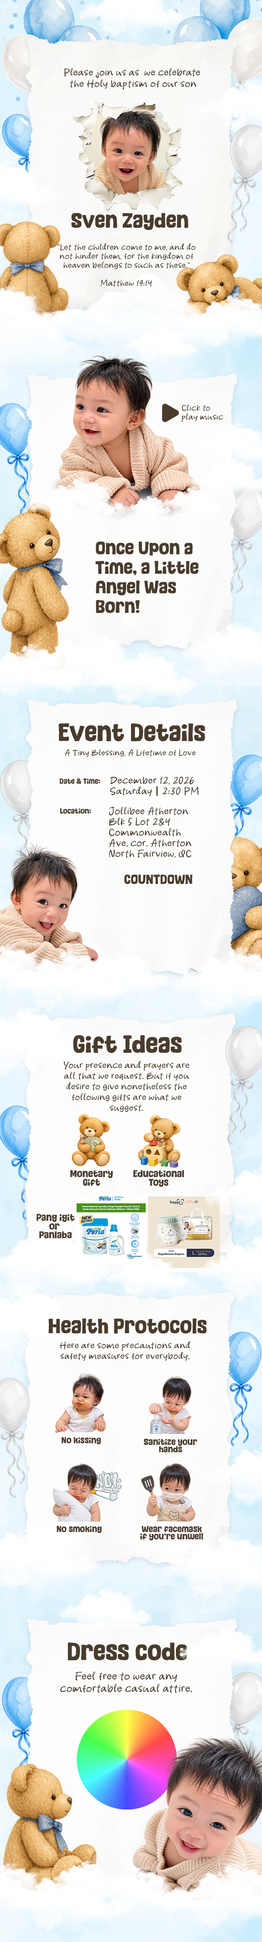
<style>
.page{position:relative;width:262px;height:1942px}
.page>*{position:absolute;margin:0}
.t1{font:9.7px/11.4px "TasteBreadHD";color:#493c2d}
.t2{font:19.4px "TasteBread";color:#493c2d}
.t3{font:8.2px/9px "TasteBreadHD";color:#493c2d}
.t4{font:16.7px/19.6px "TasteBread";color:#493c2d}
.t5{font:23px "TasteBread";color:#493c2d}
.t6{font:8.2px "TasteBreadHD";color:#493c2d}
.t7{font:6.9px "TasteBread";color:#493c2d}
.t8{font:9.8px/10.6px "TasteBreadHD";color:#493c2d}
.t9{font:12.2px "TasteBread";color:#493c2d}
.t10{font:9px/10.6px "TasteBreadHD";color:#493c2d}
.t11{font:9px/8.7px "TasteBread";color:#493c2d}
.t12{font:8.2px "TasteBread";color:#493c2d}
.t13{font:8.2px/7.4px "TasteBread";color:#493c2d}
.t14{font:10.6px/12.3px "TasteBreadHD";color:#493c2d}
</style>
<div class="page">
<p class="t1" style="left:64px;top:68px;width:136px;height:22px;text-align:center">Please join us as  we celebrate <br>the Holy baptism of our son</p>
<p class="t2" style="left:71px;top:213px;width:117px;height:17px">Sven Zayden</p>
<p class="t3" style="left:57px;top:243px;width:139px;height:44px;text-align:center">“Let the children come to me, and do not hinder them, for the kingdom of heaven belongs to such as these.”<br><br>Matthew 19:14</p>
<p class="t3" style="left:181px;top:404px;width:42px;height:18px">Click to<br>play music</p>
<p class="t4" style="left:95px;top:542px;width:103px;height:71px">Once Upon a<br>Time, a Little<br>Angel Was<br>Born!</p>
<p class="t5" style="left:59px;top:723px;width:146px;height:19px">Event Details</p>
<p class="t6" style="left:64px;top:749px;width:132px;height:8px">A Tiny Blessing, A Lifetime of Love</p>
<p class="t7" style="left:60px;top:778px;width:40px;height:6px">Date &amp; Time:</p>
<p class="t8" style="left:110px;top:776px;width:89px;height:20px">December 12, 2026<br>Saturday    2:30 PM</p>
<p class="t7" style="left:60px;top:808px;width:31px;height:6px">Location:</p>
<p class="t8" style="left:108px;top:807px;width:83px;height:51px">Jollibee Atherton<br>Blk 5 Lot 2&amp;4 Commonwealth Ave. cor. Atherton North Fairview, QC</p>
<p class="t9" style="left:124px;top:875px;width:68px;height:9px">COUNTDOWN</p>
<p class="t5" style="left:73px;top:1035px;width:109px;height:18px">Gift Ideas</p>
<p class="t10" style="left:64px;top:1061px;width:125px;height:51px;text-align:center">Your presence and prayers are all that we request. But if you desire to give nonetheless the following gifts are what we suggest.</p>
<p class="t11" style="left:70px;top:1170px;width:43px;height:16px;text-align:center">Monetary<br>Gift</p>
<p class="t11" style="left:133px;top:1170px;width:51px;height:17px;text-align:center">Educational<br>Toys</p>
<p class="t11" style="left:36px;top:1214px;width:39px;height:25px;text-align:center">Pang igit<br>or <br>Panlaba</p>
<p class="t2" style="left:48px;top:1318px;width:159px;height:16px">Health Protocols</p>
<p class="t10" style="left:59px;top:1341px;width:131px;height:20px;text-align:center">Here are some precautions and safety measures for everybody.</p>
<p class="t12" style="left:61px;top:1437px;width:40px;height:7px">No kissing</p>
<p class="t13" style="left:144px;top:1439px;width:53px;height:14px;text-align:center">Sanitize your<br>hands</p>
<p class="t12" style="left:56px;top:1526px;width:46px;height:7px">No smoking</p>
<p class="t13" style="left:140px;top:1526px;width:63px;height:15px;text-align:center">Wear facemask<br>if you’re unwell</p>
<p class="t5" style="left:68px;top:1642px;width:119px;height:19px">Dress code</p>
<p class="t14" style="left:60px;top:1672px;width:132px;height:21px;text-align:center">Feel free to wear any comfortable casual attire.</p>
</div>
